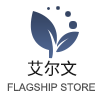
<style>
.page{position:relative;width:100px;height:100px;background:#ffffff}
.page>*{position:absolute;margin:0}
.t1{font:16.6px "SourceHanSansCN-Regular";color:#1c1c1c;text-transform:uppercase}
.t2{font:10.2px "ArialMT";color:#525252;text-transform:uppercase}
</style>
<div class="page">
<p class="t1" style="left:27px;top:60px;width:50px;height:16px">艾尔文</p>
<p class="t2" style="left:7px;top:83px;width:88px;height:8px">Flagship store</p>
</div>
